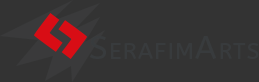
<style>
.page{position:relative;width:259px;height:82px;background:#333333}
.page>*{position:absolute;margin:0}
.t1{font:32px "ABeeZee-Regular";letter-spacing:0.06em;color:#383b3d;font-variant:small-caps}
</style>
<div class="page">
<p class="t1" style="left:90px;top:36px;width:169px;height:23px">SerafimArts</p>
</div>
